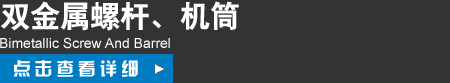
<style>
.page{position:relative;width:450px;height:83px;background:#333333}
.page>*{position:absolute;margin:0}
.t1{font:30px "STJTBZ";color:#ffffff}
.t2{font:14px "ArialMT";color:#ffffff}
</style>
<div class="page">
<p class="t1" style="left:0px;top:1px;width:239px;height:30px">双金属螺杆、机筒</p>
<p class="t2" style="left:0px;top:37px;width:170px;height:12px">Bimetallic Screw And Barrel</p>
</div>
